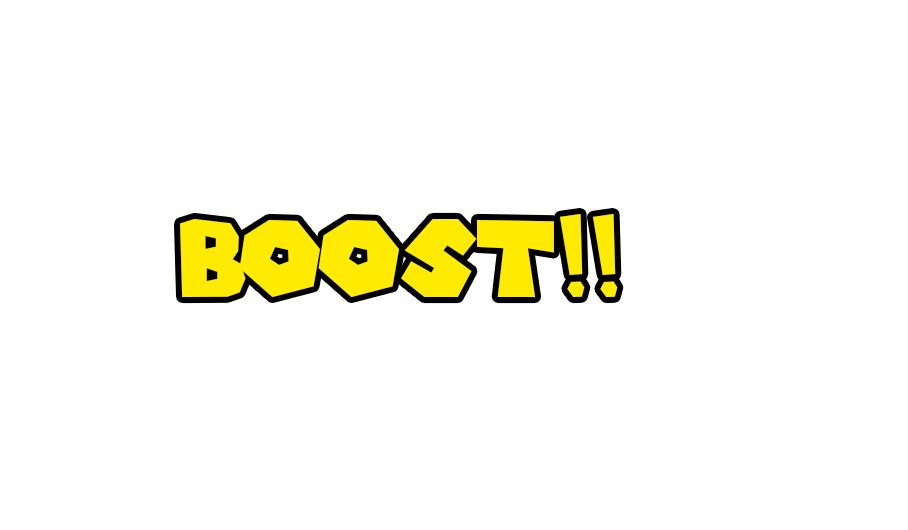
<style>
.page{position:relative;width:908px;height:530px;background:#ffffff}
.page>*{position:absolute;margin:0}
.t1{font:104.2px "SuperMarioGalaxy";color:#ffea01}
</style>
<div class="page">
<p class="t1" style="left:180px;top:214px;width:438px;height:83px">BOOST!!</p>
</div>
